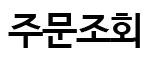
<style>
.page{position:relative;width:154px;height:60px;background:#ffffff}
.page>*{position:absolute;margin:0}
.t1{font:37.5px "HCRDotum-Bold";letter-spacing:-0.06em;color:#000000}
</style>
<div class="page">
<p class="t1" style="left:8px;top:13px;width:132px;height:35px">주문조회</p>
</div>
